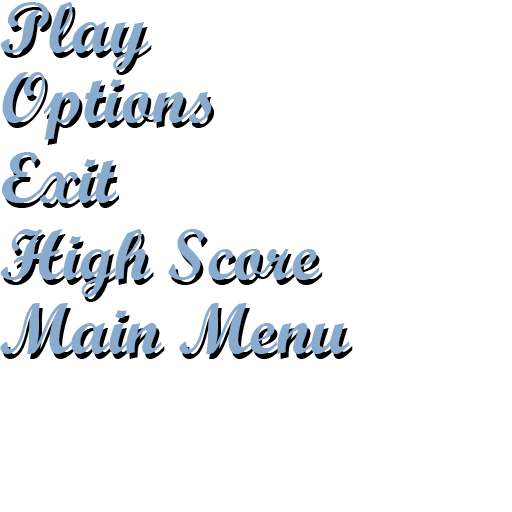
<style>
.page{position:relative;width:512px;height:512px;background:#ffffff}
.page>*{position:absolute;margin:0}
.t1{font:72px "ScriptMTBold";color:#89abce}
</style>
<div class="page">
<p class="t1" style="left:2px;top:72px;width:210px;height:68px">Options</p>
<p class="t1" style="left:2px;top:152px;width:114px;height:51px">Exit</p>
<p class="t1" style="left:0px;top:229px;width:320px;height:68px">High Score</p>
<p class="t1" style="left:0px;top:303px;width:350px;height:51px">Main Menu</p>
</div>
